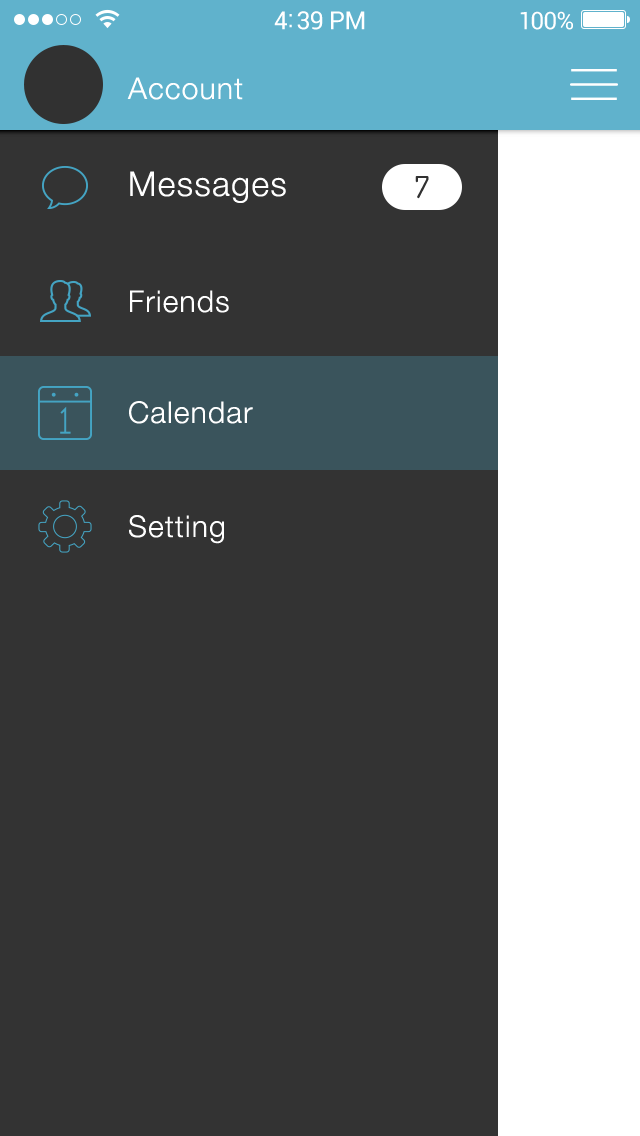
<style>
.page{position:relative;width:640px;height:1136px;background:#333333}
.page>*{position:absolute;margin:0}
.t1{font:30px "HelveticaNeue-Light";letter-spacing:0.04em;color:#ffffff}
.t2{font:34px "HelveticaNeue-Light";letter-spacing:0.04em;color:#ffffff}
.t3{font:30px "Dosis-Regular";letter-spacing:0.04em;color:#313131}
</style>
<div class="page">
<p class="t1" style="left:127px;top:77px;width:116px;height:23px">Account</p>
<p class="t2" style="left:130px;top:171px;width:156px;height:32px">Messages</p>
<p class="t3" style="left:415px;top:176px;width:14px;height:23px">7</p>
<p class="t1" style="left:130px;top:290px;width:99px;height:23px">Friends</p>
<p class="t1" style="left:129px;top:401px;width:124px;height:23px">Calendar</p>
<p class="t1" style="left:129px;top:515px;width:95px;height:29px">Setting</p>
</div>
